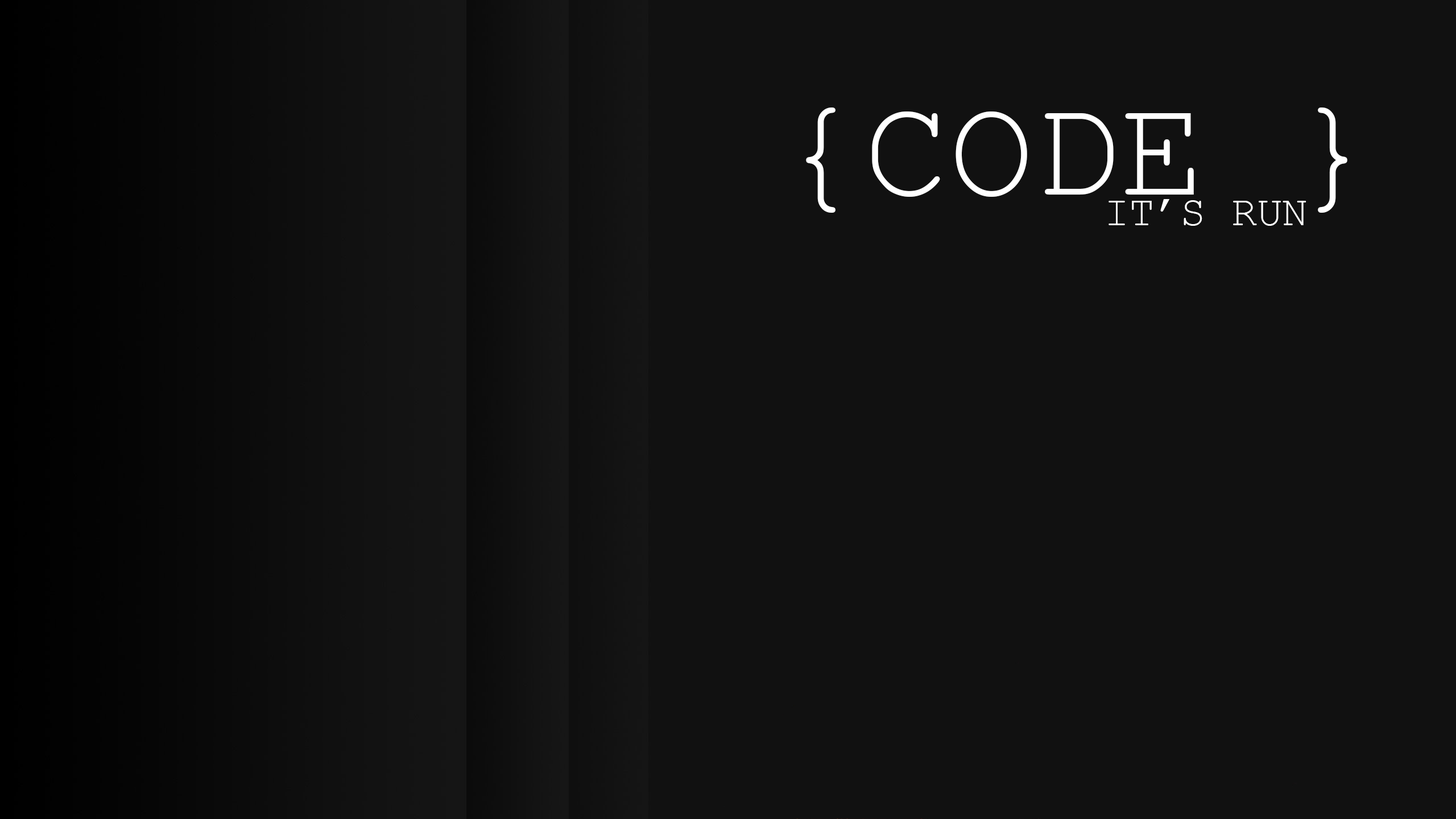
<style>
.page{position:relative;width:1456px;height:819px;background:#111111}
.page>*{position:absolute;margin:0}
.t1{font:142.2px "CourierNewPSMT";color:#ffffff}
.t2{font:42.5px "CourierNewPSMT";color:#ffffff}
</style>
<div class="page">
<p class="t1" style="left:806px;top:107px;width:541px;height:106px">{CODE }</p>
<p class="t2" style="left:1108px;top:199px;width:198px;height:27px">IT’S RUN</p>
</div>
